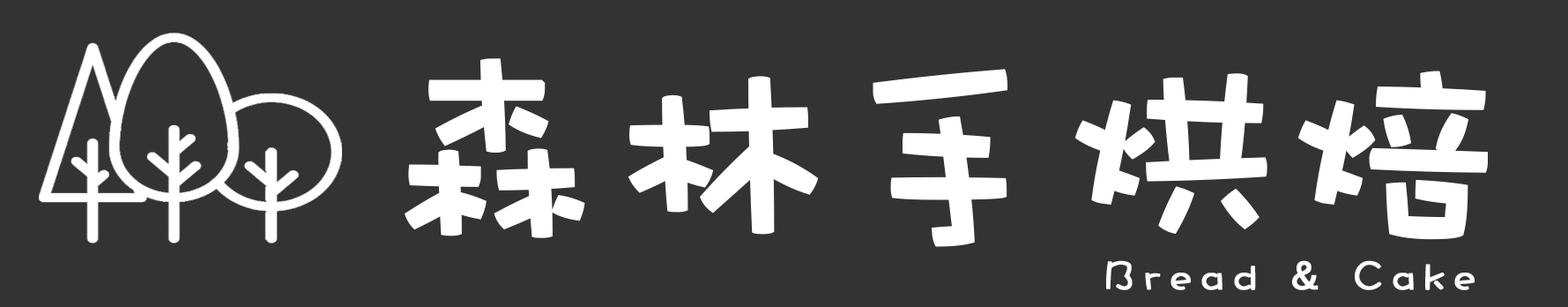
<style>
.page{position:relative;width:1568px;height:307px;background:#333333}
.page>*{position:absolute;margin:0}
.t1{font:220.3px "DFWaWa-W5-WINP-BF";letter-spacing:-0.005em;color:#ffffff;font-weight:bold}
.t2{font:44.1px "DFWaWa-W5-WINP-BF";letter-spacing:0.2em;color:#ffffff;font-weight:bold}
</style>
<div class="page">
<p class="t1" style="left:405px;top:58px;width:1083px;height:189px">森林手烘焙</p>
<p class="t2" style="left:1106px;top:260px;width:369px;height:30px">Bread &amp; Cake</p>
</div>
